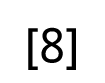
<style>
.page{position:relative;width:105px;height:83px;background:#ffffff}
.page>*{position:absolute;margin:0}
.t1{font:47.9px "DroidSans";color:#000000}
</style>
<div class="page">
<p class="t1" style="left:28px;top:27px;width:48px;height:43px">[8]</p>
</div>
